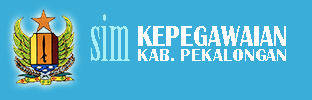
<style>
.page{position:relative;width:312px;height:100px;background:#3aaed9}
.page>*{position:absolute;margin:0}
.t1{font:63px "BirchStd";color:#aaeef8;scale:0.76 1}
.t2{font:30.5px "BritannicBold";color:#ffffff;scale:0.8 1}
.t3{font:18px "BritannicBold";color:#ffffff}
</style>
<div class="page">
<p class="t1" style="left:91px;top:14px;width:39px;height:47px">sim</p>
<p class="t2" style="left:138px;top:26px;width:148px;height:20px">KEPEGAWAIAN</p>
<p class="t3" style="left:138px;top:49px;width:148px;height:12px">KAB. PEKALONGAN</p>
</div>
